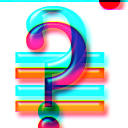
<style>
.page{position:relative;width:128px;height:128px;background:#ffffff}
.page>*{position:absolute;margin:0}
.t1{font:160px "Georgia"}
.t2{font:180px "Georgia"}
</style>
<div class="page">
<p class="t1" style="left:26px;top:4px;width:61px;height:116px">?</p>
<p class="t2" style="left:15px;top:50px;width:90px;height:44px">=</p>
</div>
